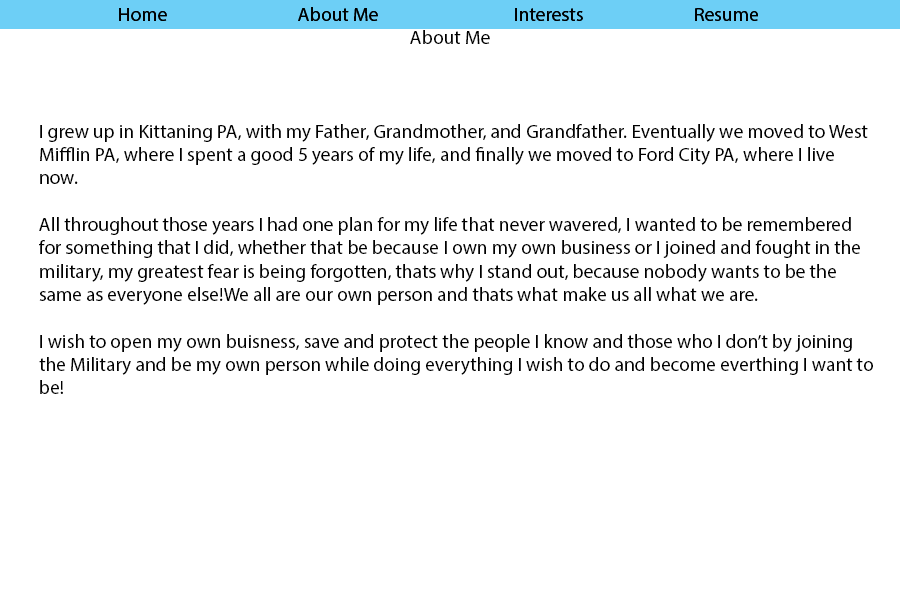
<style>
.page{position:relative;width:900px;height:600px;background:#ffffff}
.page>*{position:absolute;margin:0}
.t1{font:19.4px "MyriadPro-Regular";color:#000000}
</style>
<div class="page">
<p class="t1" style="left:119px;top:7px;width:639px;height:14px">Home    About Me    Interests    Resume</p>
<p class="t1" style="left:119px;top:7px;width:639px;height:14px">Home    About Me    Interests    Resume</p>
<p class="t1" style="left:410px;top:30px;width:80px;height:14px">About Me</p>
<p class="t1" style="left:39px;top:124px;width:834px;height:270px">I grew up in Kittaning PA, with my Father, Grandmother, and Grandfather. Eventually we moved to West Mifflin PA, where I spent a good 5 years of my life, and finally we moved to Ford City PA, where I live now. <br><br>All throughout those years I had one plan for my life that never wavered, I wanted to be remembered for something that I did, whether that be because I own my own business or I joined and fought in the military, my greatest fear is being forgotten, thats why I stand out, because nobody wants to be the same as everyone else!We all are our own person and thats what make us all what we are.<br><br>I wish to open my own buisness, save and protect the people I know and those who I don’t by joining the Military and be my own person while doing everything I wish to do and become everthing I want to be!</p>
</div>
